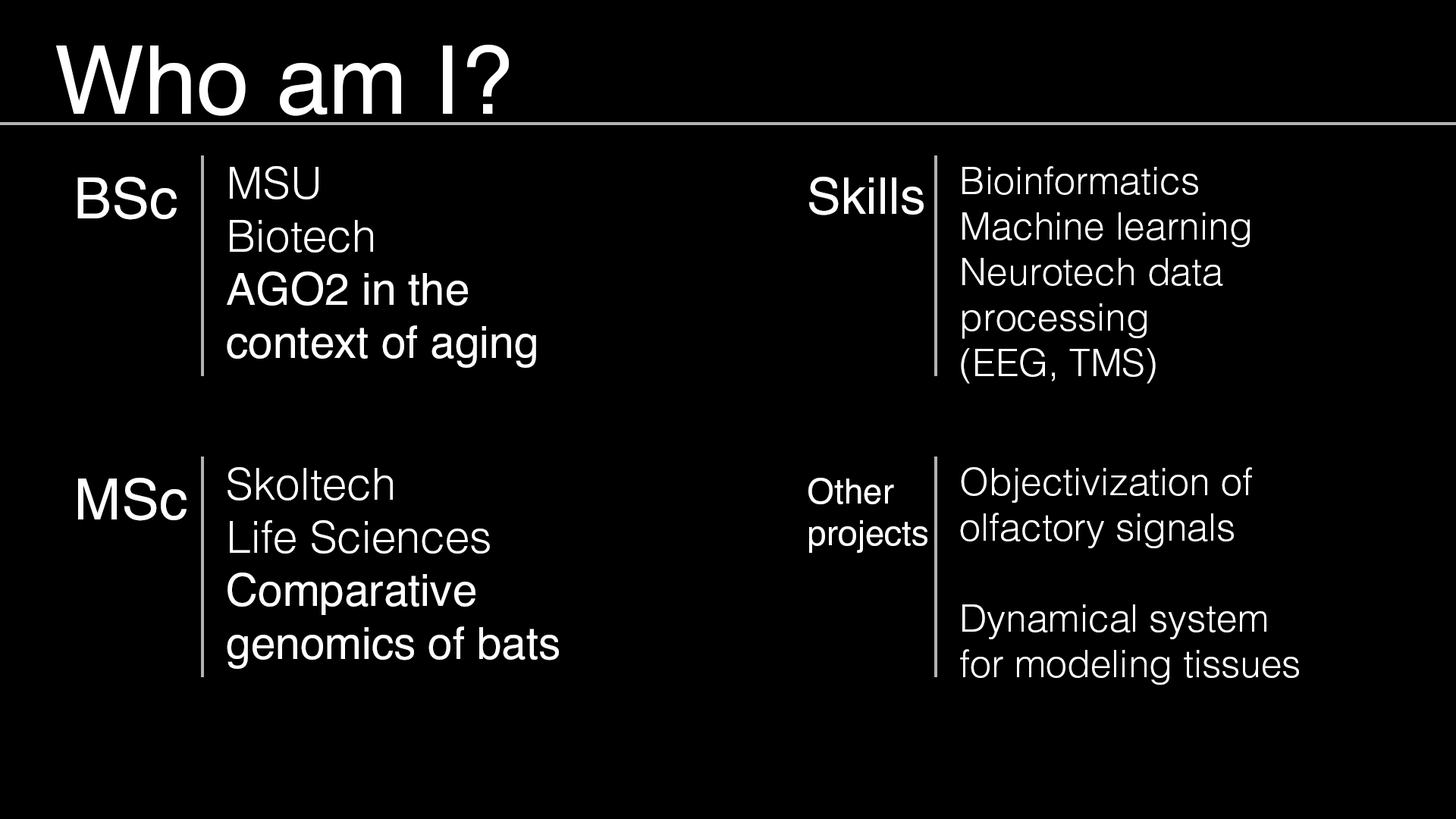
<style>
.page{position:relative;width:1456px;height:819px;background:#000000}
.page>*{position:absolute;margin:0}
.t1{font:94.8px "Helvetica-Regular";color:#ffffff}
.t2{font:44.2px "Helvetica-Regular";color:#ffffff}
.t3{font:44.2px "Helvetica-Light";color:#ffffff}
.t4{font:37.9px "Helvetica-Light";color:#ffffff}
.t5{font:56.9px "Helvetica-Regular";color:#ffffff}
.t6{font:50.6px "Helvetica-Regular";color:#ffffff}
.t7{font:34.8px "Helvetica-Regular";color:#ffffff}
</style>
<div class="page">
<p class="t1" style="left:56px;top:45px;width:453px;height:71px">Who am I?</p>
<p class="t2" style="left:227px;top:166px;width:309px;height:202px"><span class="t3">MSU<br>Biotech<br></span>AGO2 in the context of aging</p>
<p class="t4" style="left:961px;top:166px;width:289px;height:218px">Bioinformatics<br>Machine learning<br>Neurotech data processing <br>(EEG, TMS)</p>
<p class="t5" style="left:77px;top:177px;width:100px;height:43px">BSc</p>
<p class="t6" style="left:809px;top:177px;width:115px;height:38px">Skills</p>
<p class="t2" style="left:227px;top:467px;width:332px;height:202px"><span class="t3">Skoltech<br>Life Sciences<br></span>Comparative genomics of bats</p>
<p class="t4" style="left:960px;top:467px;width:339px;height:218px">Objectivization of olfactory signals<br><br>Dynamical system for modeling tissues</p>
<p class="t5" style="left:78px;top:478px;width:109px;height:43px">MSc</p>
<p class="t7" style="left:808px;top:478px;width:119px;height:75px">Other<br>projects</p>
</div>
